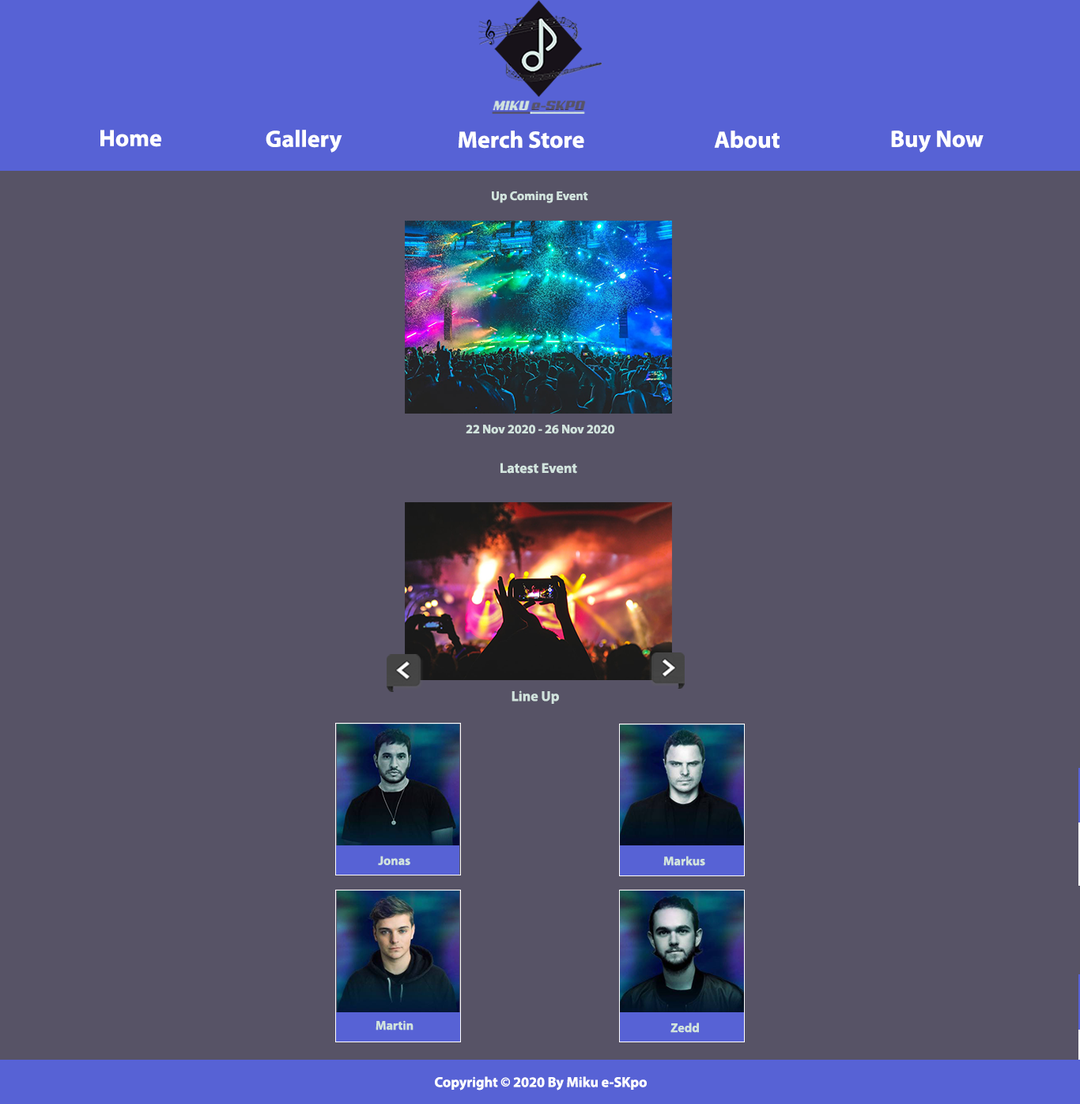
<style>
.page{position:relative;width:1080px;height:1104px;background:#575366}
.page>*{position:absolute;margin:0}
.t1{font:23.7px "MyriadPro-Bold";color:#ffffff}
.t2{font:12.7px "MyriadPro-Bold";color:#d1e3dd}
.t3{font:14.2px "MyriadPro-Bold";color:#d1e3dd}
.t4{font:12.6px "MyriadPro-Bold";color:#d1e3dd}
.t5{font:14.2px "MyriadPro-Bold";color:#ffffff}
</style>
<div class="page">
<p class="t1" style="left:100px;top:130px;width:61px;height:17px">Home</p>
<p class="t1" style="left:266px;top:130px;width:76px;height:23px">Gallery</p>
<p class="t1" style="left:459px;top:130px;width:125px;height:19px">Merch Store</p>
<p class="t1" style="left:714px;top:130px;width:66px;height:19px">About</p>
<p class="t1" style="left:891px;top:130px;width:93px;height:23px">Buy Now</p>
<p class="t2" style="left:492px;top:191px;width:96px;height:12px">Up Coming Event</p>
<p class="t2" style="left:466px;top:425px;width:148px;height:9px">22 Nov 2020 - 26 Nov 2020</p>
<p class="t3" style="left:501px;top:463px;width:76px;height:11px">Latest Event</p>
<p class="t3" style="left:512px;top:690px;width:47px;height:14px">Line Up</p>
<p class="t4" style="left:378px;top:856px;width:32px;height:9px">Jonas</p>
<p class="t4" style="left:663px;top:856px;width:42px;height:10px">Markus</p>
<p class="t4" style="left:376px;top:1020px;width:38px;height:10px">Martin</p>
<p class="t4" style="left:671px;top:1022px;width:28px;height:11px">Zedd</p>
<p class="t5" style="left:435px;top:1076px;width:212px;height:14px">Copyright © 2020 By Miku e-SKpo</p>
</div>
